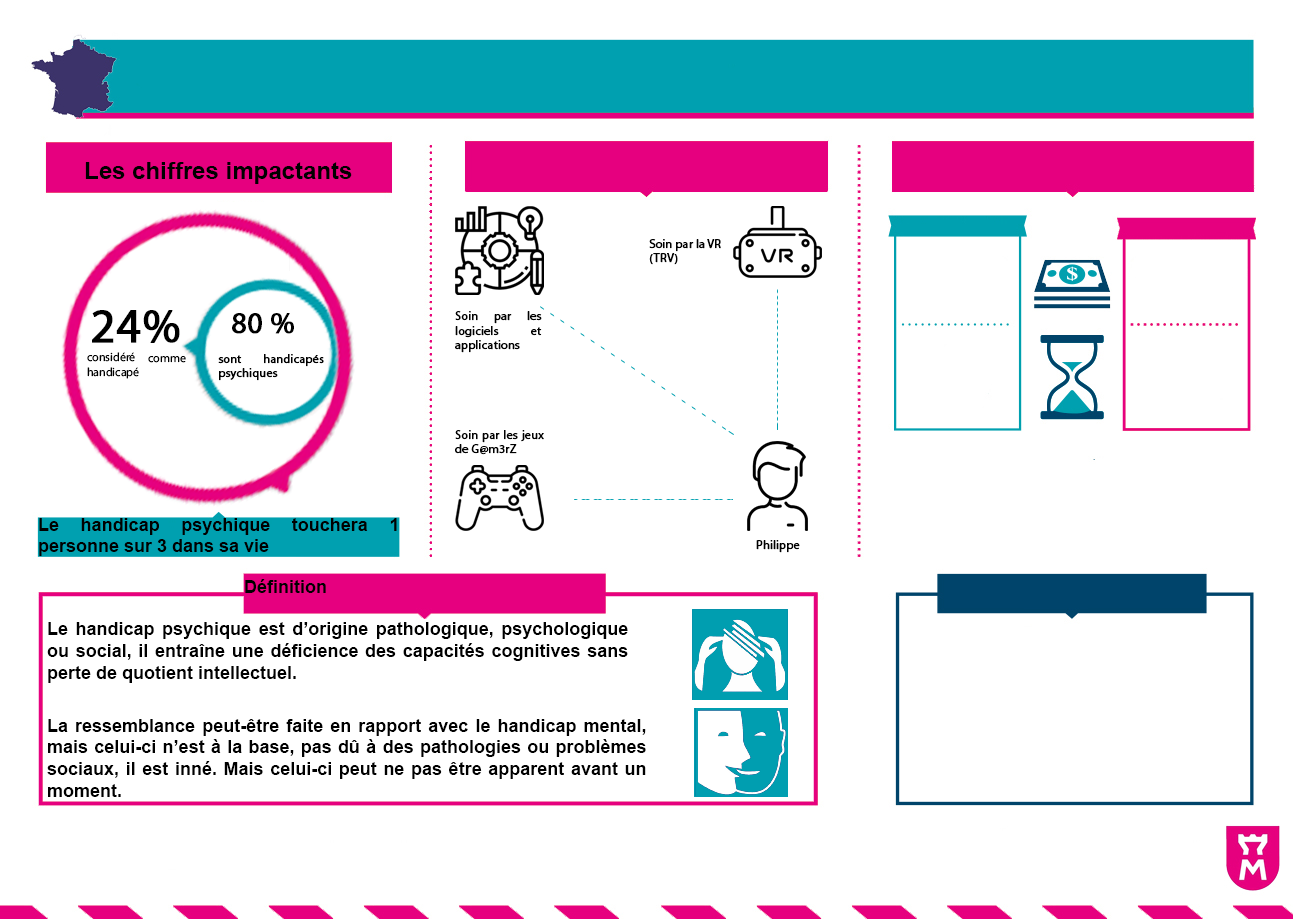
<style>
.page{position:relative;width:1293px;height:919px;background:#ffffff}
.page>*{position:absolute;margin:0}
.t1{font:24px "Arial-BoldMT";color:#000000}
.t2{font:12px "Arial-BoldMT";color:#000000}
.t3{font:12px "MyriadPro-Regular";color:#010101;font-weight:bold}
.t4{font:48px "MyriadPro-Regular";color:#000000;font-weight:bold}
.t5{font:30px "MyriadPro-Regular";color:#000000;font-weight:bold}
.t6{font:12px "MyriadPro-Regular";color:#000000}
.t7{font:12px "MyriadPro-Regular";color:#000000;font-weight:bold}
.t8{font:18px "Arial-BoldMT";color:#000000}
</style>
<div class="page">
<p class="t1" style="left:85px;top:162px;width:267px;height:22px"><span class="t2"><br></span>Les chiffres impactants</p>
<p class="t3" style="left:649px;top:239px;width:72px;height:26px;text-align:justify">Soin par la VR <br>(TRV)</p>
<p class="t4" style="left:92px;top:310px;width:88px;height:33px">24%</p>
<p class="t5" style="left:232px;top:313px;width:62px;height:21px">80 %</p>
<p class="t3" style="left:455px;top:311px;width:87px;height:42px;text-align:justify">Soin par les logiciels et applications</p>
<p class="t6" style="left:87px;top:352px;width:99px;height:27px;text-align:justify">considéré comme handicapé</p>
<p class="t7" style="left:218px;top:354px;width:106px;height:27px;text-align:justify">sont handicapés psychiques</p>
<p class="t3" style="left:455px;top:430px;width:89px;height:25px;text-align:justify">Soin par les jeux de G@m3rZ</p>
<p class="t8" style="left:39px;top:518px;width:358px;height:38px;text-align:justify">Le handicap psychique touchera 1 personne sur 3 dans sa vie</p>
<p class="t3" style="left:756px;top:540px;width:44px;height:13px">Philippe</p>
<p class="t8" style="left:245px;top:579px;width:81px;height:14px">Définition</p>
<p class="t8" style="left:47px;top:622px;width:581px;height:61px;text-align:justify">Le handicap psychique est d’origine pathologique, psychologique ou social, il entraîne une déficience des capacités cognitives sans perte de quotient intellectuel.</p>
<p class="t8" style="left:47px;top:719px;width:599px;height:78px;text-align:justify">La ressemblance peut-être faite en rapport avec le handicap mental, mais celui-ci n’est à la base, pas dû à des pathologies ou problèmes sociaux, il est inné. Mais celui-ci peut ne pas être apparent avant un moment.</p>
</div>
